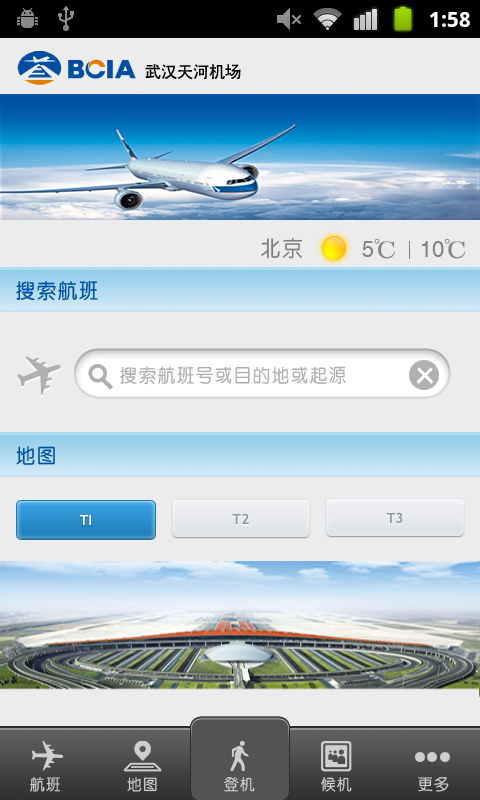
<style>
.page{position:relative;width:480px;height:800px;background:#ececec}
.page>*{position:absolute;margin:0}
.t1{font:16px "CTCuHeiSJ";color:#000000}
.t2{font:22px "CTZhongYuanSJ";color:#808080}
.t3{font:22px "CTZhongYuanSJ";color:#838383}
.t4{font:21px "CTZhongYuanSJ";color:#0051a3}
.t5{font:19px "CTZhongYuanSJ";color:#b0b0b0}
.t6{font:14px "TrebuchetMS-Bold";color:#ffffff;text-transform:uppercase}
.t7{font:14px "TrebuchetMS-Bold";color:#8c96a0;text-transform:uppercase}
.t8{font:16px "CTZhongYuanSJ";color:#d1cece}
</style>
<div class="page">
<p class="t1" style="left:145px;top:64px;width:96px;height:16px">武汉天河机场</p>
<p class="t2" style="left:261px;top:238px;width:41px;height:21px">北京</p>
<p class="t3" style="left:362px;top:238px;width:33px;height:21px">5℃</p>
<p class="t3" style="left:421px;top:238px;width:45px;height:21px">10℃</p>
<p class="t4" style="left:16px;top:280px;width:82px;height:21px">搜索航班</p>
<p class="t5" style="left:120px;top:366px;width:226px;height:19px">搜索航班号或目的地或起源</p>
<p class="t4" style="left:16px;top:446px;width:39px;height:19px">地图</p>
<p class="t6" style="left:79px;top:515px;width:12px;height:10px">ti</p>
<p class="t7" style="left:232px;top:513px;width:17px;height:11px">T2</p>
<p class="t7" style="left:386px;top:512px;width:17px;height:11px">T3</p>
<p class="t8" style="left:30px;top:777px;width:31px;height:15px">航班</p>
<p class="t8" style="left:127px;top:777px;width:30px;height:15px">地图</p>
<p class="t8" style="left:224px;top:777px;width:31px;height:15px">登机</p>
<p class="t8" style="left:321px;top:777px;width:31px;height:15px">候机</p>
<p class="t8" style="left:418px;top:777px;width:31px;height:15px">更多</p>
</div>
